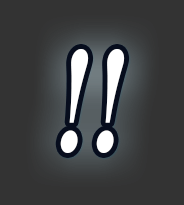
<style>
.page{position:relative;width:184px;height:205px;background:#333333}
.page>*{position:absolute;margin:0}
.t1{font:136.5px "RyuminPro-Heavy";letter-spacing:0.1em;color:#ffffff;font-style:italic;scale:0.73 1}
</style>
<div class="page">
<p class="t1" style="left:60px;top:49px;width:65px;height:104px">!!</p>
</div>
